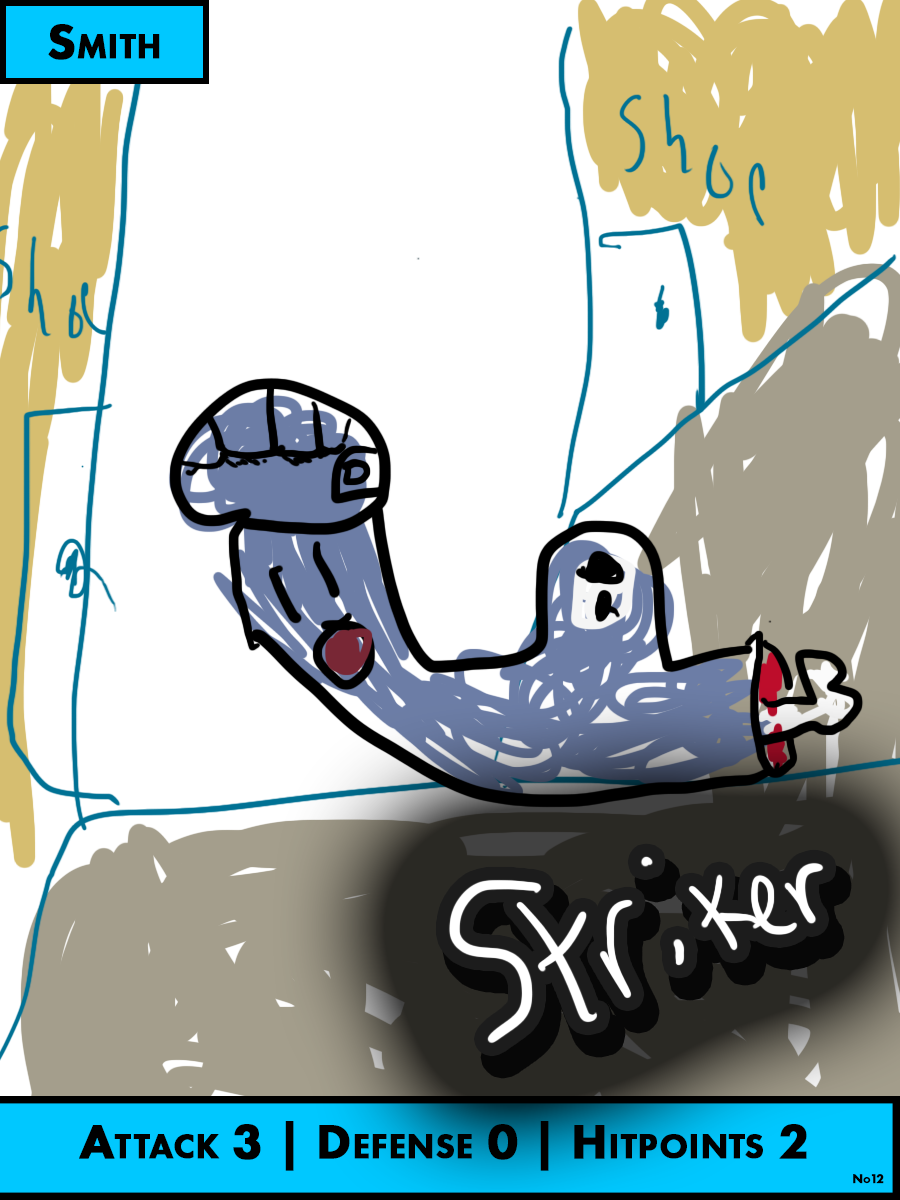
<style>
.page{position:relative;width:900px;height:1200px;background:#ffffff}
.page>*{position:absolute;margin:0}
.t1{font:50px "FuturaPT-Heavy";color:#000000;font-variant:small-caps;font-weight:bold}
.t2{font:12.5px "FuturaPT-Heavy";color:#000000;font-variant:small-caps;font-weight:bold}
</style>
<div class="page">
<p class="t1" style="left:48px;top:24px;width:112px;height:36px">Smith</p>
<p class="t1" style="left:79px;top:1121px;width:728px;height:50px">Attack 3 | Defense 0 | Hitpoints 2</p>
<p class="t2" style="left:853px;top:1174px;width:31px;height:10px">No12</p>
</div>
